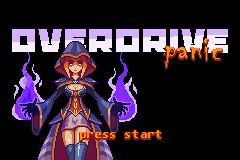
<style>
.page{position:relative;width:240px;height:160px;background:#000000}
.page>*{position:absolute;margin:0}
.t1{font:36px "BananaBrick";letter-spacing:0.05em;color:#d7afff}
.t2{font:36px "Chiller-Regular";letter-spacing:0.05em;color:#f48d1f}
.t3{font:12px "Consolas-Bold";letter-spacing:0.05em;color:#f48d1f}
</style>
<div class="page">
<p class="t1" style="left:12px;top:29px;width:216px;height:24px">Overdrive</p>
<p class="t2" style="left:164px;top:38px;width:58px;height:29px">panic</p>
<p class="t3" style="left:80px;top:130px;width:81px;height:10px">press start</p>
</div>
